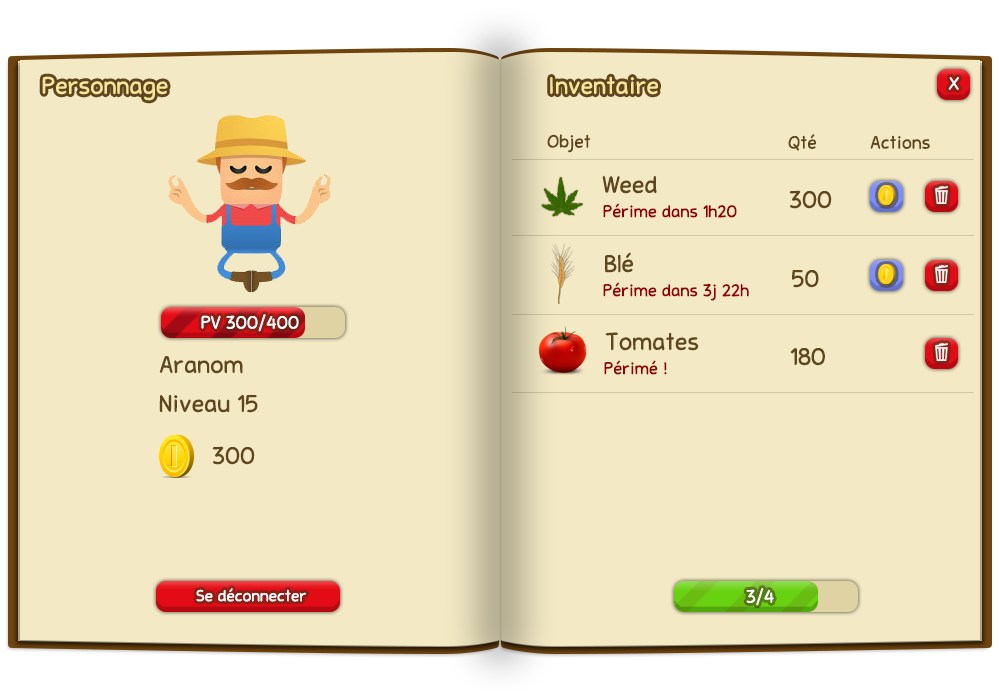
<style>
.page{position:relative;width:1000px;height:700px;background:#f3e9c4}
.page>*{position:absolute;margin:0}
.t1{font:24px "StanberryRegular";color:#f7e59c}
.t2{font:18px "StanberryRegular";color:#ffffff}
.t3{font:18px "StanberryRegular";color:#5f461c}
.t4{font:24px "StanberryRegular";color:#5f461c}
.t5{font:17px "StanberryRegular";color:#930000}
.t6{font:16px "StanberryRegular";color:#ffffff}
</style>
<div class="page">
<p class="t1" style="left:42px;top:76px;width:126px;height:25px">Personnage</p>
<p class="t1" style="left:550px;top:76px;width:108px;height:19px">Inventaire</p>
<p class="t2" style="left:948px;top:77px;width:11px;height:13px">X</p>
<p class="t3" style="left:547px;top:134px;width:44px;height:19px">Objet</p>
<p class="t3" style="left:788px;top:134px;width:28px;height:17px">Qté</p>
<p class="t3" style="left:870px;top:135px;width:60px;height:14px">Actions</p>
<p class="t4" style="left:602px;top:175px;width:55px;height:19px">Weed</p>
<p class="t4" style="left:789px;top:190px;width:43px;height:19px">300</p>
<p class="t5" style="left:603px;top:203px;width:134px;height:15px">Périme dans 1h20</p>
<p class="t4" style="left:605px;top:252px;width:28px;height:21px">Blé</p>
<p class="t4" style="left:792px;top:270px;width:27px;height:18px">50</p>
<p class="t5" style="left:603px;top:282px;width:146px;height:19px">Périme dans 3j 22h</p>
<p class="t2" style="left:201px;top:314px;width:98px;height:18px">PV 300/400</p>
<p class="t4" style="left:605px;top:332px;width:94px;height:19px">Tomates</p>
<p class="t4" style="left:790px;top:347px;width:35px;height:19px">180</p>
<p class="t4" style="left:159px;top:356px;width:84px;height:18px">Aranom</p>
<p class="t5" style="left:604px;top:360px;width:63px;height:15px">Périmé !</p>
<p class="t4" style="left:159px;top:394px;width:99px;height:19px">Niveau 15</p>
<p class="t4" style="left:212px;top:446px;width:43px;height:19px">300</p>
<p class="t6" style="left:196px;top:588px;width:110px;height:14px">Se déconnecter</p>
<p class="t2" style="left:746px;top:588px;width:28px;height:18px">3/4</p>
</div>
